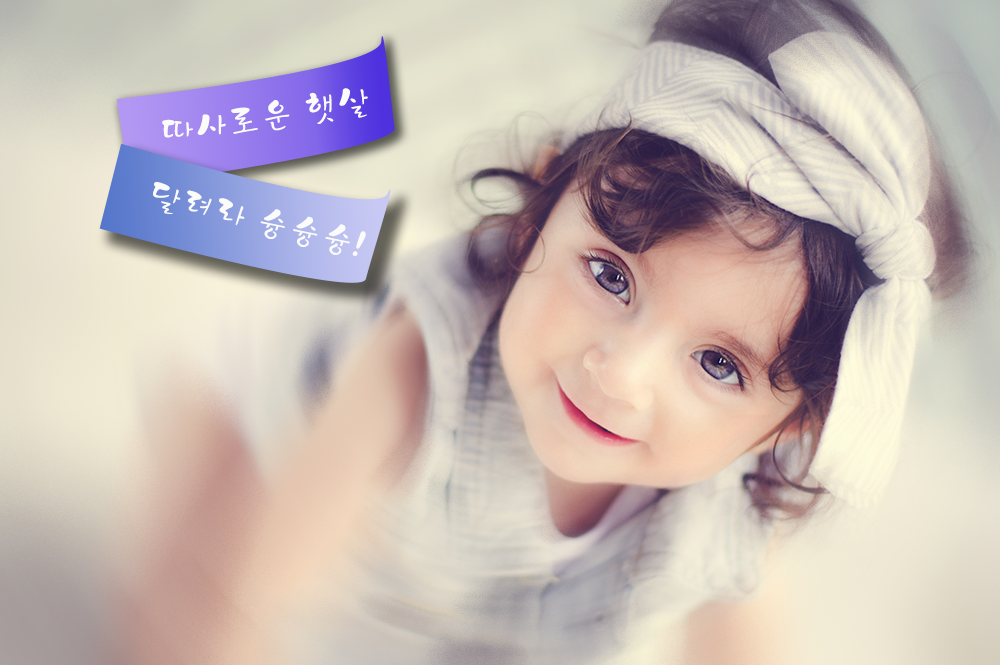
<style>
.page{position:relative;width:1000px;height:665px}
.page>*{position:absolute;margin:0}
.t1{font:33.3px "Yj-DOOLGI-Medium";color:#fbfbfb}
</style>
<div class="page">
<p class="t1" style="left:162px;top:88px;width:206px;height:50px;rotate:-9deg">따사로운 햇살</p>
<p class="t1" style="left:153px;top:182px;width:213px;height:74px;rotate:13deg">달려라 슝슝슝!</p>
</div>
